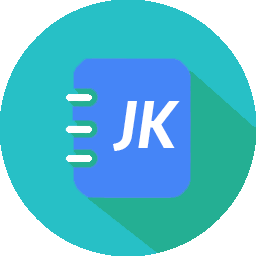
<style>
.page{position:relative;width:256px;height:256px;background:#27c0c6}
.page>*{position:absolute;margin:0}
.t1{font:60px "Nobile-BoldItalic";color:#ffffff}
</style>
<div class="page">
<p class="t1" style="left:113px;top:101px;width:67px;height:50px">JK</p>
</div>
